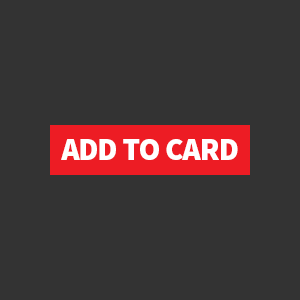
<style>
.page{position:relative;width:300px;height:300px;background:#333333}
.page>*{position:absolute;margin:0}
.t1{font:31.2px "SourceSansPro-Black";letter-spacing:-0.025em;color:#ffffff}
</style>
<div class="page">
<p class="t1" style="left:61px;top:139px;width:177px;height:21px">ADD TO CARD</p>
</div>
